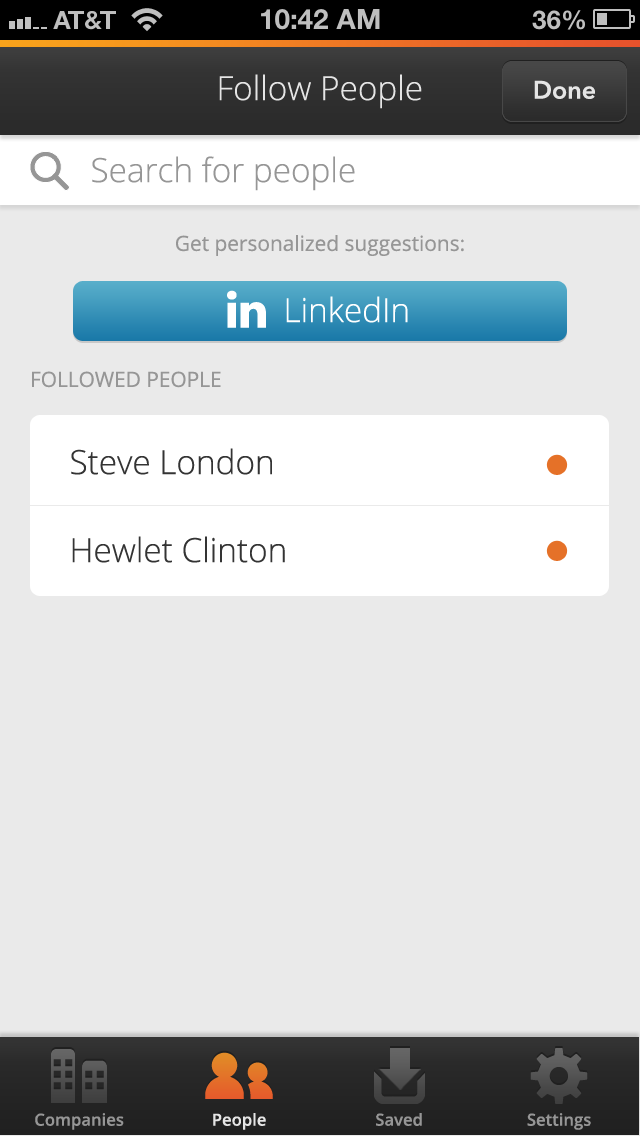
<style>
.page{position:relative;width:640px;height:1136px;background:#eaeaea}
.page>*{position:absolute;margin:0}
.t1{font:33.3px "OpenSans-Light";color:#e5e5e5}
.t2{font:25px "AvenirNext-DemiBold";color:#e5e5e5}
.t3{font:33.3px "OpenSans-Light";color:#969696}
.t4{font:20.8px "OpenSans";color:#969696}
.t5{font:33.3px "OpenSans-Light";color:#ffffff}
.t6{font:33.3px "OpenSans-Light";color:#343434}
.t7{font:16.7px "OpenSans-Semibold";color:#969696}
.t8{font:16.7px "OpenSans-Semibold";color:#e5e5e5}
</style>
<div class="page">
<p class="t1" style="left:219px;top:74px;width:203px;height:35px">Follow People</p>
<p class="t2" style="left:534px;top:80px;width:61px;height:19px">Done</p>
<p class="t3" style="left:92px;top:156px;width:263px;height:35px">Search for people</p>
<p class="t4" style="left:176px;top:235px;width:288px;height:21px">Get personalized suggestions:</p>
<p class="t5" style="left:286px;top:296px;width:122px;height:27px">LinkedIn</p>
<p class="t4" style="left:32px;top:371px;width:189px;height:17px">FOLLOWED PEOPLE</p>
<p class="t6" style="left:71px;top:448px;width:201px;height:27px">Steve London</p>
<p class="t6" style="left:72px;top:536px;width:213px;height:27px">Hewlet Clinton</p>
<p class="t7" style="left:35px;top:1113px;width:89px;height:17px">Companies</p>
<p class="t8" style="left:213px;top:1113px;width:53px;height:17px">People</p>
<p class="t7" style="left:376px;top:1113px;width:46px;height:13px">Saved</p>
<p class="t7" style="left:527px;top:1113px;width:64px;height:17px">Settings</p>
</div>
